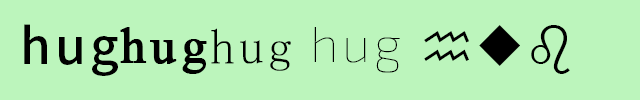
<style>
.page{position:relative;width:640px;height:100px;background:#bcf5bc}
.page>*{position:absolute;margin:0}
.t1{font:50px "SourceHanSans-Medium";letter-spacing:0.1em;color:#000000}
.t2{font:50px "TimesNewRomanPSMT";letter-spacing:0.1em;color:#000000;font-weight:bold}
.t3{font:50px "MS-PMincho";letter-spacing:0.1em;color:#000000}
.t4{font:50px "Exo2Roman-Thin";letter-spacing:0.1em;color:#000000}
</style>
<div class="page">
<p class="t1" style="left:24px;top:24px;width:94px;height:52px">hug</p>
<p class="t2" style="left:120px;top:27px;width:87px;height:47px">hug</p>
<p class="t3" style="left:211px;top:28px;width:80px;height:43px">hug</p>
<p class="t4" style="left:314px;top:27px;width:86px;height:46px">hug</p>
</div>
